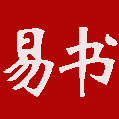
<style>
.page{position:relative;width:119px;height:119px;background:#b10404}
.page>*{position:absolute;margin:0}
.t1{font:84.9px "STXinwei";letter-spacing:-0.29em;color:#f0e5e5}
</style>
<div class="page">
<p class="t1" style="left:3px;top:27px;width:115px;height:70px">易书</p>
</div>
